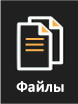
<style>
.page{position:relative;width:78px;height:104px;background:#202020}
.page>*{position:absolute;margin:0}
.t1{font:12px "Calibri-Bold";color:#ffffff}
</style>
<div class="page">
<p class="t1" style="left:16px;top:80px;width:48px;height:12px">Файлы</p>
</div>
